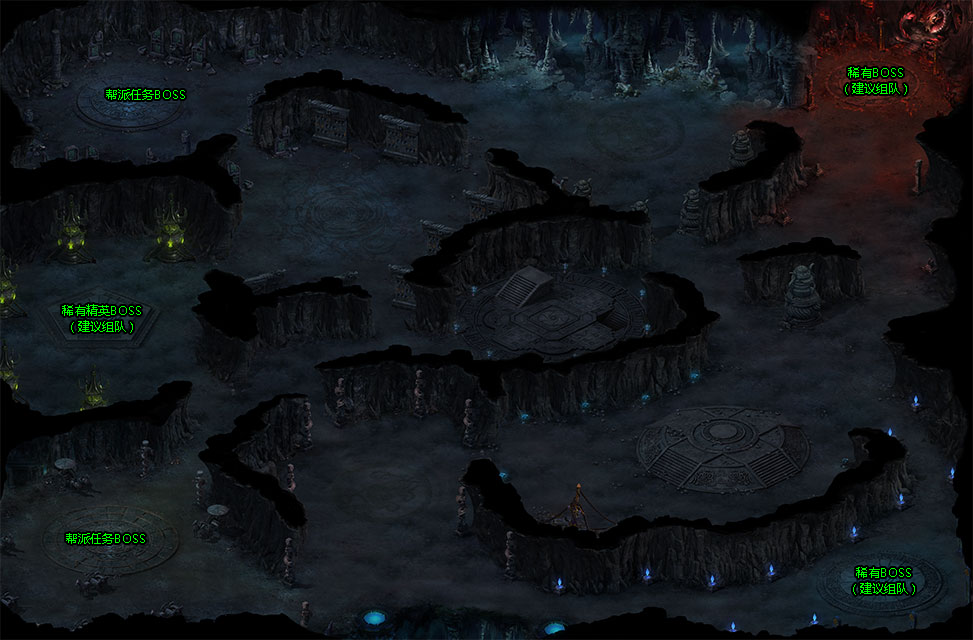
<style>
.page{position:relative;width:973px;height:640px}
.page>*{position:absolute;margin:0}
.t1{font:12px/16px "MicrosoftYaHei";color:#00ff00}
.t2{font:12px "MicrosoftYaHei";color:#00ff00}
</style>
<div class="page">
<p class="t1" style="left:845px;top:67px;width:62px;height:28px;text-align:center">稀有BOSS<br>（建议组队）</p>
<p class="t2" style="left:106px;top:89px;width:79px;height:11px">帮派任务BOSS</p>
<p class="t1" style="left:62px;top:304px;width:79px;height:29px;text-align:center">稀有精英BOSS<br>（建议组队）</p>
<p class="t2" style="left:66px;top:533px;width:79px;height:11px">帮派任务BOSS</p>
<p class="t1" style="left:853px;top:567px;width:62px;height:28px;text-align:center">稀有BOSS<br>（建议组队）</p>
</div>
